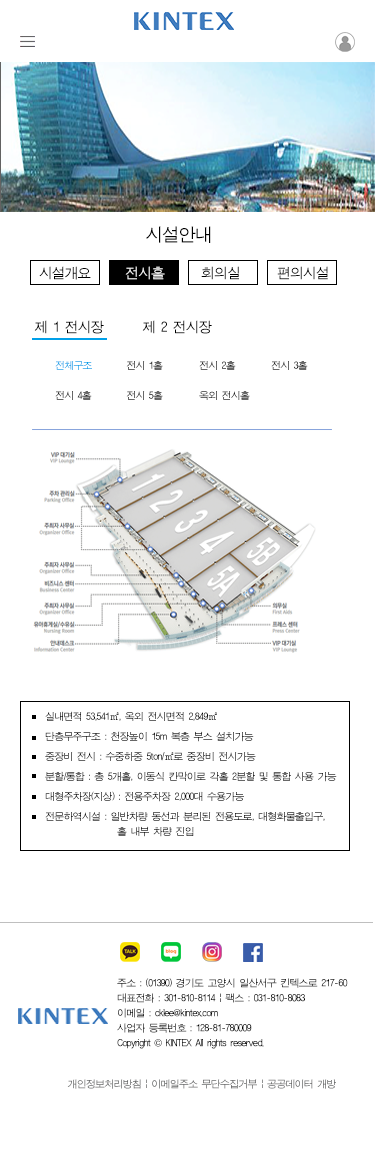
<style>
.page{position:relative;width:375px;height:1159px;background:#ffffff}
.page>*{position:absolute;margin:0}
.t1{font:18px "ÈÞ¸Õ°íµñ";letter-spacing:-0.08em;color:#010101}
.t2{font:14px "ÈÞ¸Õ°íµñ";letter-spacing:-0.08em;color:#000000}
.t3{font:14px "ÈÞ¸Õ°íµñ";letter-spacing:-0.08em;color:#f3f3f3}
.t4{font:10px/30px "ÈÞ¸Õ°íµñ";letter-spacing:-0.08em;color:#00a0e9}
.t5{font:10px/20px "ÈÞ¸Õ°íµñ";letter-spacing:-0.08em;color:#000000}
.t6{font:10px/15px "ÈÞ¸Õ°íµñ";letter-spacing:-0.08em;color:#000000}
.t7{font:10px/15px "ÈÞ¸Õ°íµñ";letter-spacing:-0.08em;color:#020202}
.t8{font:10px/15px "Gulim";letter-spacing:-0.08em;color:#020202}
.t9{font:10px "ÈÞ¸Õ°íµñ";letter-spacing:-0.08em}
</style>
<div class="page">
<p class="t1" style="left:146px;top:226px;width:65px;height:17px">시설안내</p>
<p class="t2" style="left:39px;top:266px;width:52px;height:14px">시설개요</p>
<p class="t3" style="left:125px;top:266px;width:40px;height:14px">전시홀</p>
<p class="t2" style="left:201px;top:266px;width:38px;height:14px">회의실</p>
<p class="t2" style="left:277px;top:266px;width:51px;height:14px">편의시설</p>
<p class="t2" style="left:34px;top:320px;width:178px;height:14px">제 1 전시장   제 2 전시장</p>
<p class="t4" style="left:55px;top:361px;width:253px;height:39px">전체구조 전시 1홀  전시 2홀 전시 3홀 <br>전시 4홀 전시 5홀  옥외 전시홀</p>
<p class="t5" style="left:45px;top:711px;width:292px;height:126px">실내면적 53,541㎡, 옥외 전시면적 2,849㎡<br>단층무주구조 : 천장높이 15m 복층 부스 설치가능<br>중장비 전시 : 수중하중 5ton/㎡로 중장비 전시가능 <br>분할/통합 : 총 5개홀, 이동식 칸막이로 각홀 2분할 및 통합 사용 가능<br>대형주차장(지상) : 전용주차장 2,000대 수용가능<br>전문하역시설 : 일반차량 동선과 분리된 전용도로, 대형화물출입구, <br><span class="t6">  홀 내부 차량 진입</span></p>
<p class="t7" style="left:117px;top:978px;width:231px;height:71px">주소 : (01390) 경기도 고양시 일산서구 킨텍스로 217-60<br>대표전화 : 301-810-8114 | 팩스 : 031-810-8083<br>이메일 : cklee@kintex.com <br>사업자 등록번호 : 128-81-780009<br>Copyright <span class="t8">©</span> KINTEX All rights reserved.</p>
<p class="t9" style="left:67px;top:1079px;width:269px;height:10px">개인정보처리방침 | 이메일주소 무단수집거부 | 공공데이터 개방</p>
</div>
